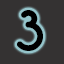
<style>
.page{position:relative;width:64px;height:64px;background:#343232}
.page>*{position:absolute;margin:0}
.t1{font:60px "Neon80s";color:#000000}
</style>
<div class="page">
<p class="t1" style="left:17px;top:10px;width:26px;height:41px">3</p>
</div>
